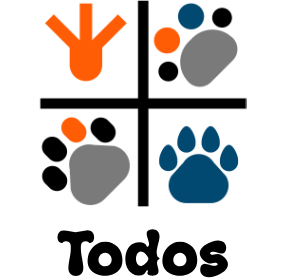
<style>
.page{position:relative;width:287px;height:278px;background:#ffffff}
.page>*{position:absolute;margin:0}
.t1{font:55.9px "Kush-Fat";color:#000000}
</style>
<div class="page">
<p class="t1" style="left:57px;top:229px;width:171px;height:49px">Todos</p>
</div>
